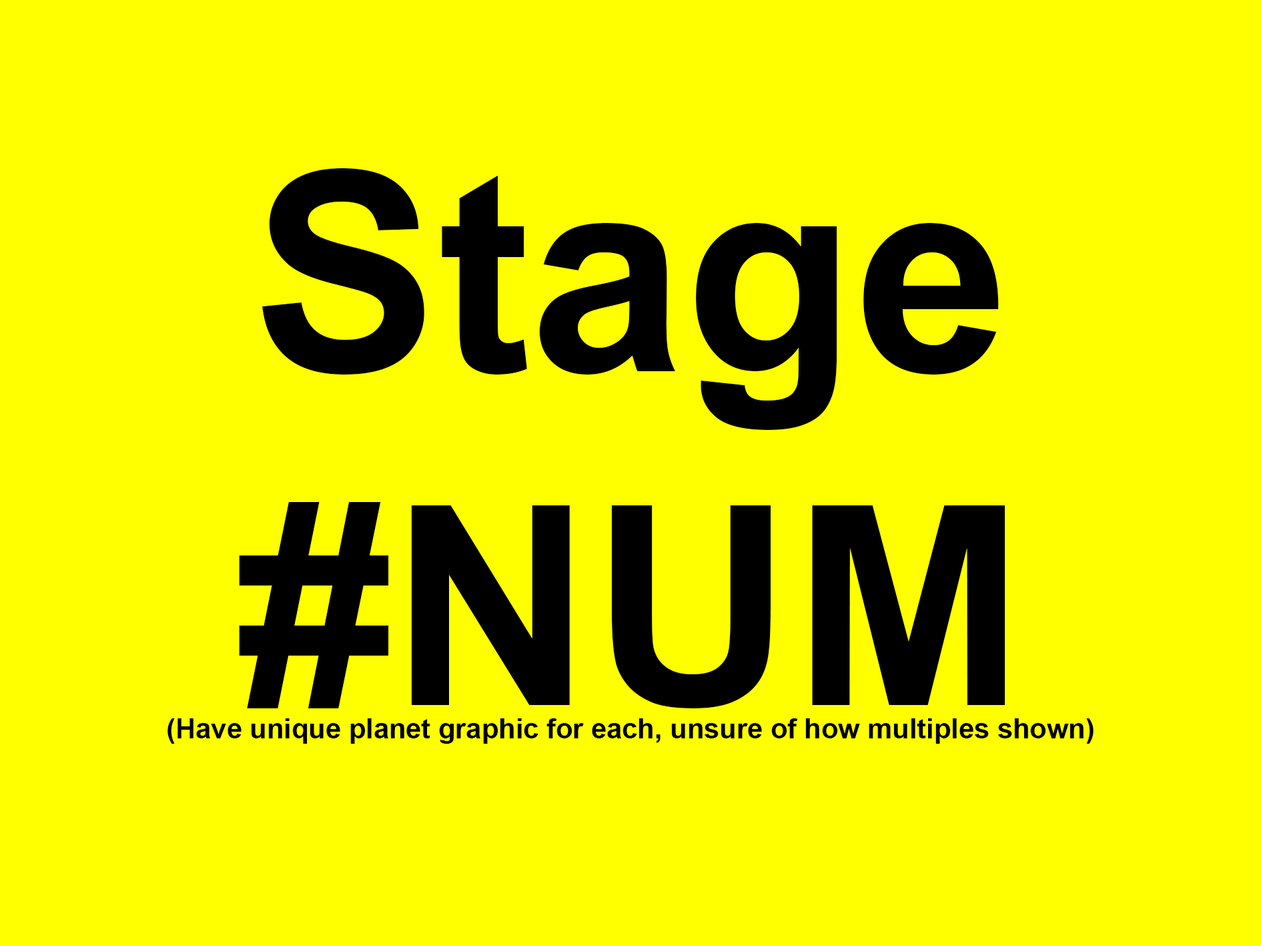
<style>
.page{position:relative;width:1261px;height:946px;background:#ffff00}
.page>*{position:absolute;margin:0}
.t1{font:27.8px "Arial-BoldMT";color:#000000}
.t2{font:278px "Arial-BoldMT";color:#000000}
</style>
<div class="page">
<p class="t1" style="left:167px;top:168px;width:927px;height:575px;text-align:center"><span class="t2">Stage #NUM<br></span>(Have unique planet graphic for each, unsure of how multiples shown)</p>
</div>
